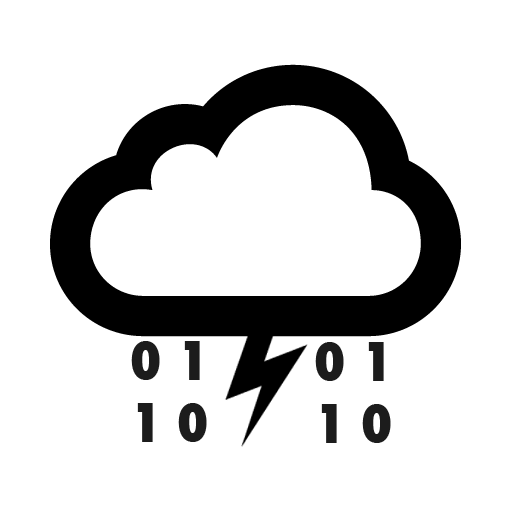
<style>
.page{position:relative;width:512px;height:512px;background:#ffffff}
.page>*{position:absolute;margin:0}
.t1{font:52px "Futura-CondensedExtraBold";color:#1c1c1c}
</style>
<div class="page">
<p class="t1" style="left:131px;top:341px;width:76px;height:101px">0 1 <br>1 0</p>
<p class="t1" style="left:315px;top:342px;width:76px;height:101px">0 1 <br>   1 0</p>
</div>
